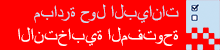
<style>
.page{position:relative;width:220px;height:50px;background:#ff0000}
.page>*{position:absolute;margin:0}
.t1{font:18.3px "ArialMT";color:#c7e0f3}
.t2{font:18.3px "ArialMT";color:#ffffff}
</style>
<div class="page">
<p class="t1" style="left:34px;top:4px;width:145px;height:19px">مبادرة حول البيانات</p>
<p class="t2" style="left:18px;top:27px;width:160px;height:19px">الانتخابية المفتوحة</p>
</div>
